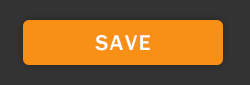
<style>
.page{position:relative;width:250px;height:85px;background:#333333}
.page>*{position:absolute;margin:0}
.t1{font:22.2px "FranklinGothic-Medium";letter-spacing:0.075em;color:#ffffff}
</style>
<div class="page">
<p class="t1" style="left:95px;top:35px;width:55px;height:16px">SAVE</p>
</div>
